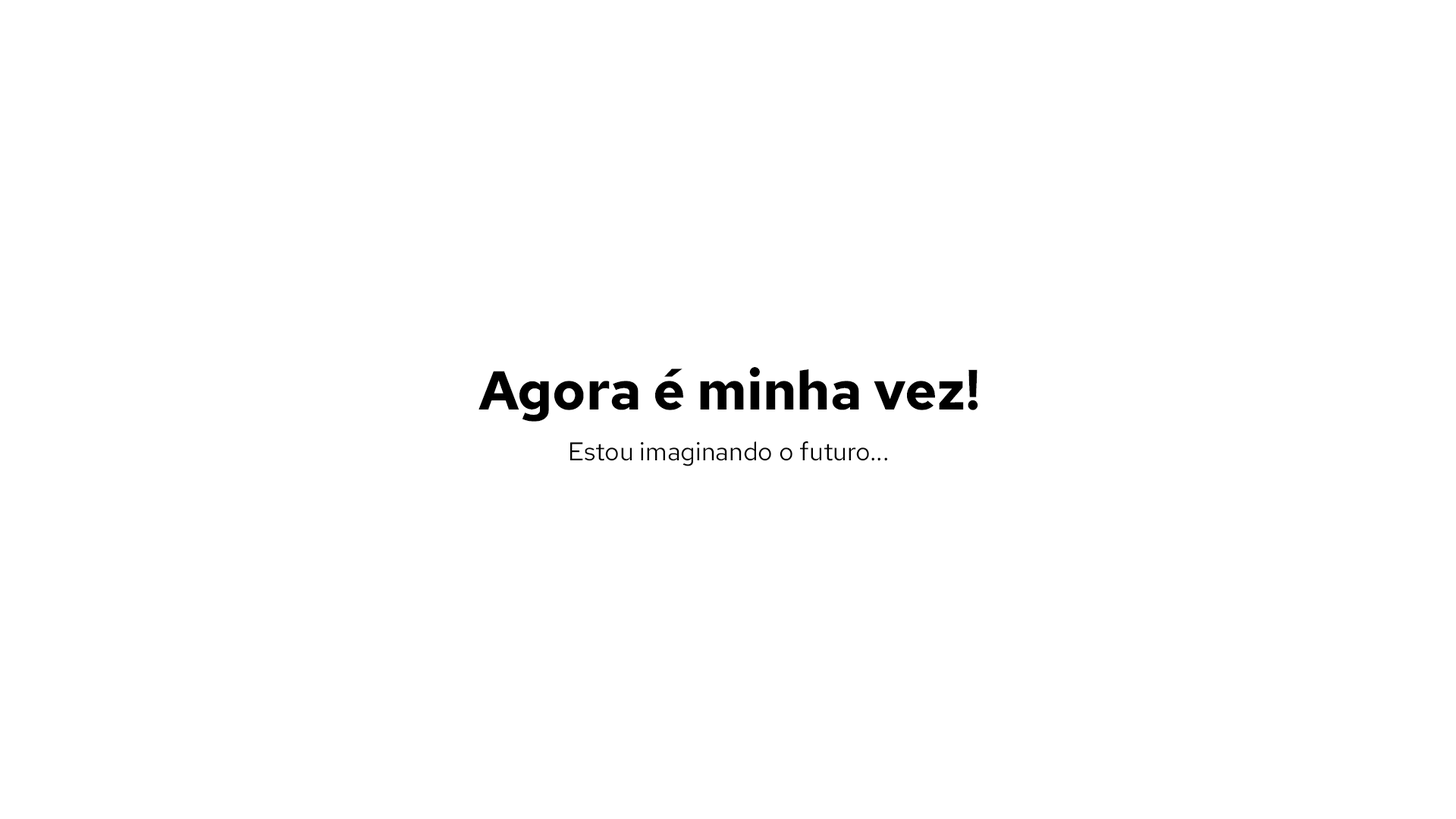
<style>
.page{position:relative;width:1456px;height:819px;background:#ffffff}
.page>*{position:absolute;margin:0}
.t1{font:54.6px "RedHatText-Bold";color:#000000}
.t2{font:25.6px "RedHatText-Regular";color:#000000}
</style>
<div class="page">
<p class="t1" style="left:479px;top:367px;width:499px;height:55px">Agora é minha vez!</p>
<p class="t2" style="left:570px;top:441px;width:317px;height:25px">Estou imaginando o futuro...</p>
</div>
